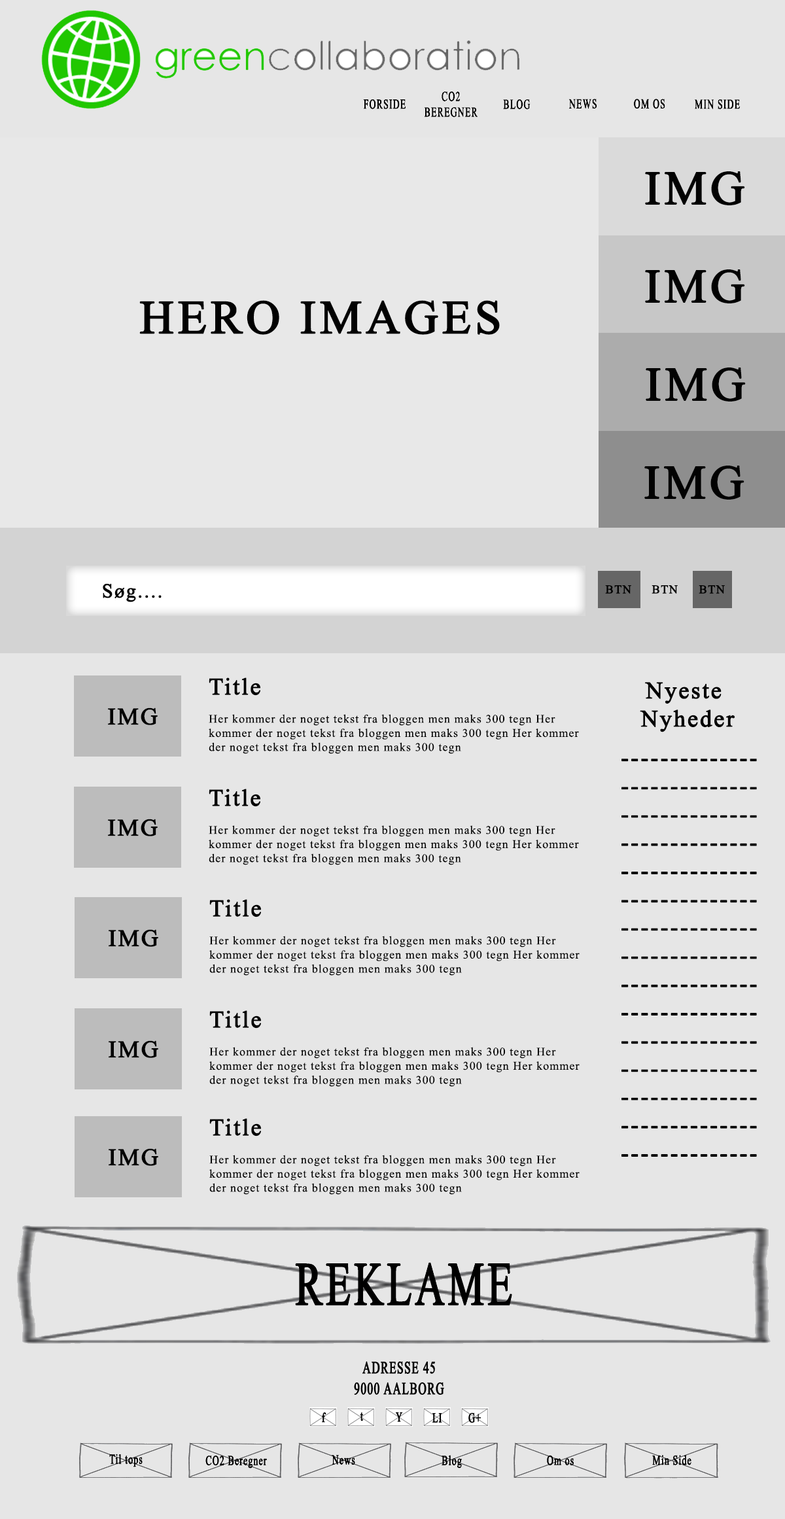
<style>
.page{position:relative;width:785px;height:1519px;background:#e6e6e6}
.page>*{position:absolute;margin:0}
.t1{font:47.1px "TimesNewRomanPSMT";letter-spacing:0.06em;color:#020202;font-weight:bold}
.t2{font:19.6px "TimesNewRomanPSMT";letter-spacing:0.06em;color:#020202;font-weight:bold}
.t3{font:11.8px "TimesNewRomanPSMT";letter-spacing:0.06em;color:#020202;font-weight:bold}
.t4{font:11.8px "TimesNewRomanPSMT";letter-spacing:0.06em;color:#020202}
.t5{font:23.5px "TimesNewRomanPSMT";letter-spacing:0.06em;color:#020202;font-weight:bold}
</style>
<div class="page">
<p class="t1" style="left:645px;top:171px;width:100px;height:34px">IMG</p>
<p class="t1" style="left:645px;top:269px;width:100px;height:34px">IMG</p>
<p class="t1" style="left:139px;top:300px;width:361px;height:35px">HERO IMAGES</p>
<p class="t1" style="left:646px;top:368px;width:100px;height:34px">IMG</p>
<p class="t1" style="left:644px;top:466px;width:100px;height:34px">IMG</p>
<p class="t2" style="left:103px;top:583px;width:59px;height:19px">Søg....</p>
<p class="t3" style="left:605px;top:585px;width:26px;height:9px">BTN</p>
<p class="t3" style="left:651px;top:585px;width:27px;height:9px">BTN</p>
<p class="t3" style="left:699px;top:585px;width:26px;height:9px">BTN</p>
<p class="t4" style="left:209px;top:678px;width:370px;height:76px"><span class="t5">Title<br></span><br>Her kommer der noget tekst fra bloggen men maks 300 tegn Her <br>kommer der noget tekst fra bloggen men maks 300 tegn Her kommer<br>der noget tekst fra bloggen men maks 300 tegn</p>
<p class="t5" style="left:640px;top:682px;width:95px;height:51px;text-align:center">Nyeste <br>Nyheder</p>
<p class="t5" style="left:108px;top:708px;width:50px;height:17px">IMG</p>
<p class="t5" style="left:621px;top:759px;width:136px;height:398px">--------------<br>--------------<br>--------------<br>--------------<br>--------------<br>--------------<br>--------------<br>--------------<br>--------------<br>--------------<br>--------------<br>--------------<br>--------------<br>--------------<br>--------------</p>
<p class="t4" style="left:209px;top:789px;width:370px;height:76px"><span class="t5">Title<br></span><br>Her kommer der noget tekst fra bloggen men maks 300 tegn Her <br>kommer der noget tekst fra bloggen men maks 300 tegn Her kommer<br>der noget tekst fra bloggen men maks 300 tegn</p>
<p class="t5" style="left:108px;top:819px;width:50px;height:18px">IMG</p>
<p class="t4" style="left:209px;top:899px;width:370px;height:77px"><span class="t5">Title<br></span><br>Her kommer der noget tekst fra bloggen men maks 300 tegn Her <br>kommer der noget tekst fra bloggen men maks 300 tegn Her kommer<br>der noget tekst fra bloggen men maks 300 tegn</p>
<p class="t5" style="left:109px;top:929px;width:49px;height:18px">IMG</p>
<p class="t4" style="left:209px;top:1010px;width:370px;height:77px"><span class="t5">Title<br></span><br>Her kommer der noget tekst fra bloggen men maks 300 tegn Her <br>kommer der noget tekst fra bloggen men maks 300 tegn Her kommer<br>der noget tekst fra bloggen men maks 300 tegn</p>
<p class="t5" style="left:109px;top:1041px;width:49px;height:17px">IMG</p>
<p class="t4" style="left:209px;top:1118px;width:370px;height:77px"><span class="t5">Title<br></span><br>Her kommer der noget tekst fra bloggen men maks 300 tegn Her <br>kommer der noget tekst fra bloggen men maks 300 tegn Her kommer<br>der noget tekst fra bloggen men maks 300 tegn</p>
<p class="t5" style="left:109px;top:1148px;width:49px;height:18px">IMG</p>
</div>
